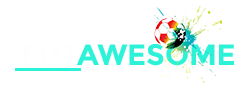
<style>
.page{position:relative;width:250px;height:88px;background:#ffffff}
.page>*{position:absolute;margin:0}
.t1{font:29.4px "Montserrat-Bold";color:#2cf2d8}
.t2{font:29.4px "Montserrat-Bold";color:#fefefe}
</style>
<div class="page">
<p class="t1" style="left:23px;top:44px;width:211px;height:22px"><span class="t2">FUT</span>AWESOME</p>
</div>
